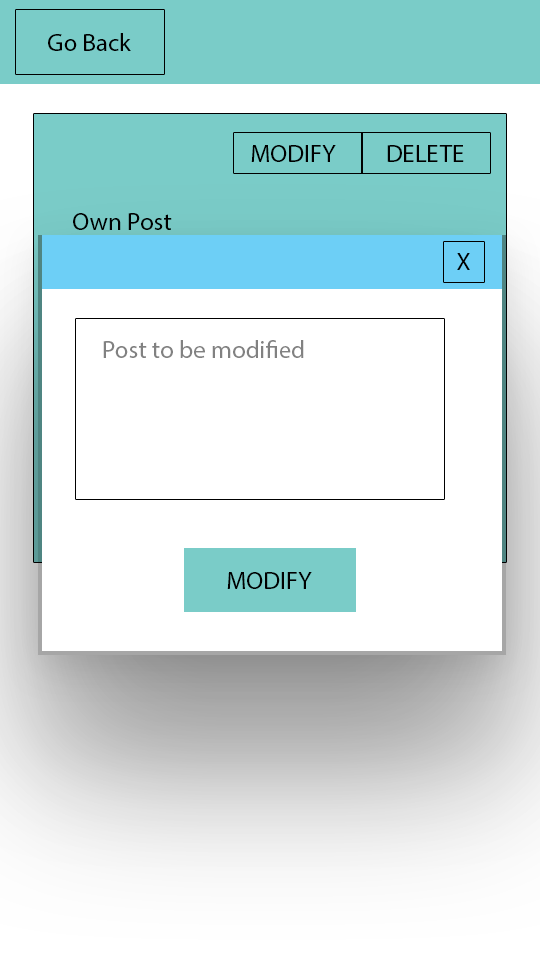
<style>
.page{position:relative;width:540px;height:960px;background:#ffffff}
.page>*{position:absolute;margin:0}
.t1{font:25px "MyriadPro-Regular";color:#000000}
.t2{font:25px "MyriadPro-Regular";color:#818181}
</style>
<div class="page">
<p class="t1" style="left:48px;top:33px;width:83px;height:18px">Go Back</p>
<p class="t1" style="left:251px;top:145px;width:85px;height:17px">MODIFY</p>
<p class="t1" style="left:387px;top:145px;width:77px;height:17px">DELETE</p>
<p class="t1" style="left:73px;top:213px;width:99px;height:17px">Own Post</p>
<p class="t1" style="left:457px;top:253px;width:13px;height:17px">X</p>
<p class="t2" style="left:103px;top:340px;width:201px;height:18px">Post to be modified</p>
<p class="t1" style="left:227px;top:572px;width:85px;height:17px">MODIFY</p>
</div>
